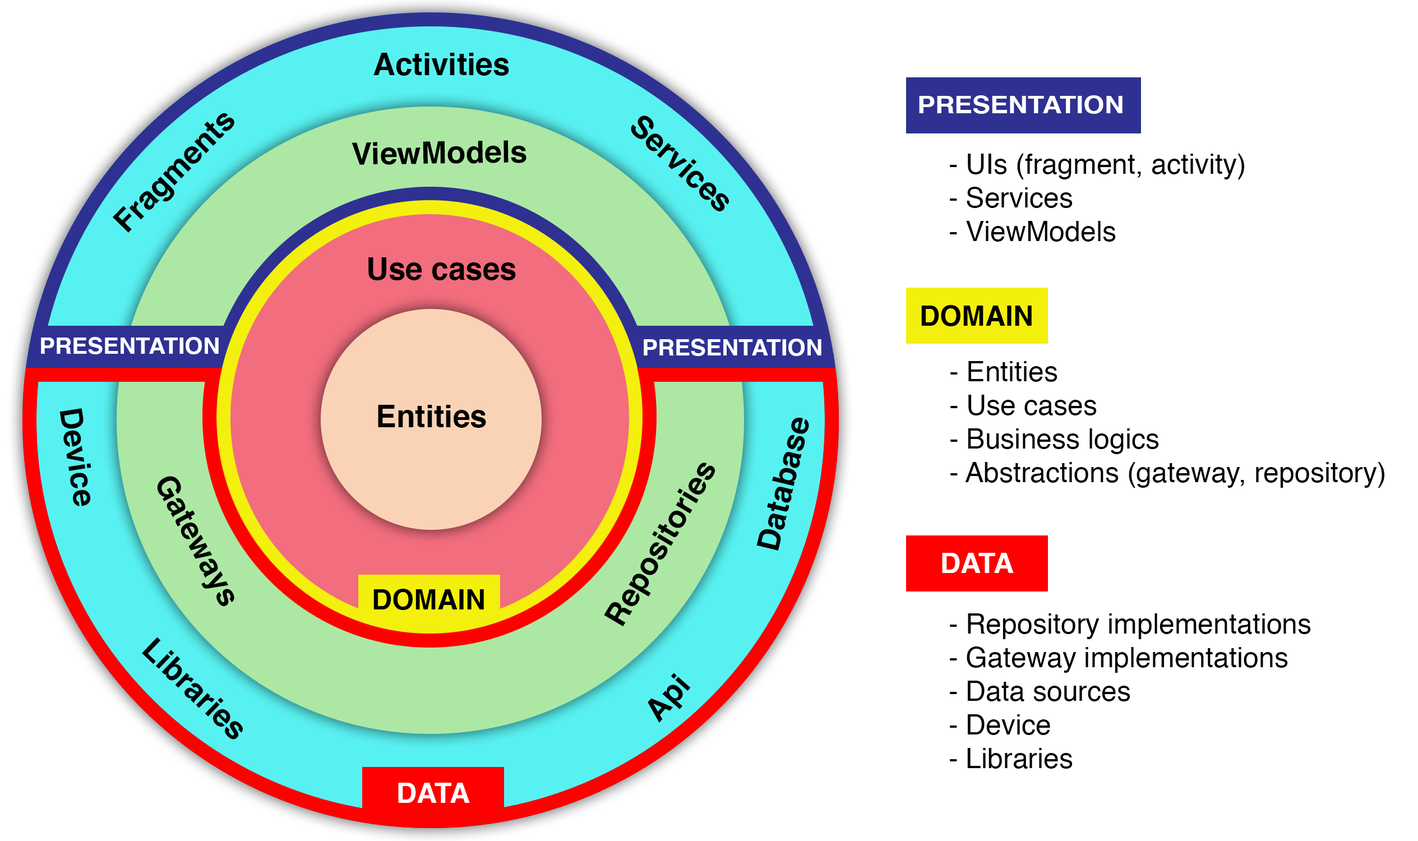
<style>
.page{position:relative;width:1418px;height:841px;background:#ffffff}
.page>*{position:absolute;margin:0}
.t1{font:30.8px "Helvetica-Bold";color:#000000}
.t2{font:24px "Helvetica-Bold";color:#ffffff;scale:1.12 1}
.t3{font:28px "Helvetica";color:#000000}
.t4{font:28px "Helvetica-Bold";color:#000000}
.t5{font:22.4px "Helvetica-Bold";color:#ffffff;scale:1.05 1}
.t6{font:28px "Helvetica-Bold";color:#ffffff}
</style>
<div class="page">
<p class="t1" style="left:373px;top:53px;width:136px;height:23px">Activities</p>
<p class="t2" style="left:919px;top:95px;width:203px;height:19px">PRESENTATION</p>
<p class="t1" style="left:112px;top:113px;width:122px;height:120px;rotate:-46deg">Fragments</p>
<p class="t1" style="left:631px;top:115px;width:98px;height:96px;rotate:43deg">Services</p>
<p class="t1" style="left:352px;top:140px;width:174px;height:25px;rotate:-1deg">ViewModels</p>
<p class="t3" style="left:950px;top:154px;width:294px;height:88px">- UIs (fragment, activity)<br>- Services<br>- ViewModels</p>
<p class="t1" style="left:368px;top:257px;width:148px;height:23px">Use cases</p>
<p class="t4" style="left:921px;top:305px;width:111px;height:21px">DOMAIN</p>
<p class="t5" style="left:41px;top:337px;width:178px;height:17px">PRESENTATION</p>
<p class="t5" style="left:644px;top:339px;width:177px;height:17px">PRESENTATION</p>
<p class="t3" style="left:950px;top:361px;width:434px;height:127px">- Entities<br>- Use cases<br>- Business logics<br>- Abstractions (gateway, repository)</p>
<p class="t1" style="left:59px;top:408px;width:32px;height:98px;rotate:81deg">Device</p>
<p class="t1" style="left:378px;top:405px;width:108px;height:23px">Entities</p>
<p class="t1" style="left:756px;top:418px;width:53px;height:133px;rotate:-76deg">Database</p>
<p class="t1" style="left:604px;top:463px;width:111px;height:164px;rotate:-59deg">Repositories</p>
<p class="t1" style="left:157px;top:476px;width:77px;height:131px;rotate:62deg">Gateways</p>
<p class="t6" style="left:942px;top:553px;width:72px;height:20px">DATA</p>
<p class="t4" style="left:373px;top:589px;width:111px;height:21px">DOMAIN</p>
<p class="t3" style="left:950px;top:613px;width:361px;height:156px">- Repository implementations<br>- Gateway implementations<br>- Data sources<br>- Device<br>- Libraries</p>
<p class="t1" style="left:142px;top:637px;width:101px;height:103px;rotate:44deg">Libraries</p>
<p class="t1" style="left:648px;top:673px;width:43px;height:50px;rotate:-49deg">Api</p>
<p class="t6" style="left:398px;top:783px;width:72px;height:20px">DATA</p>
</div>
